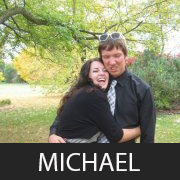
<style>
.page{position:relative;width:180px;height:180px}
.page>*{position:absolute;margin:0}
.t1{font:26.7px "MyriadPro-Regular";color:#faf7f7}
</style>
<div class="page">
<p class="t1" style="left:39px;top:153px;width:101px;height:18px">MICHAEL</p>
</div>
